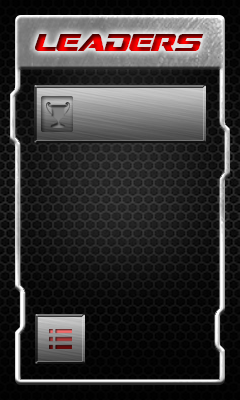
<style>
.page{position:relative;width:240px;height:400px}
.page>*{position:absolute;margin:0}
.t1{font:24px "DreamMMA"}
</style>
<div class="page">
<p class="t1" style="left:35px;top:34px;width:169px;height:17px">leaders</p>
</div>
